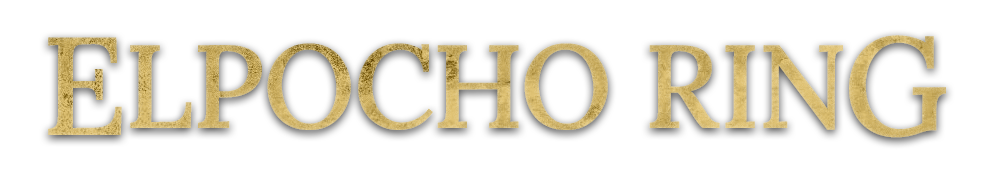
<style>
.page{position:relative;width:1000px;height:180px;background:#ffffff}
.page>*{position:absolute;margin:0}
.t1{font:118px "Lora-Medium";color:#e2c577}
.t2{font:139px "Lora-Medium";color:#e2c577}
</style>
<div class="page">
<p class="t1" style="left:48px;top:35px;width:898px;height:103px"><span class="t2">E</span>LPOCHO RIN<span class="t2">G</span></p>
</div>
